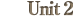
<style>
.page{position:relative;width:73px;height:19px;background:#ffffff}
.page>*{position:absolute;margin:0}
.t1{font:18px "RyuminPro-ExBold";letter-spacing:-0.08em;font-weight:bold}
</style>
<div class="page">
<p class="t1" style="left:27px;top:1px;width:47px;height:15px">Unit 2</p>
</div>
